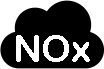
<style>
.page{position:relative;width:104px;height:69px;background:#000000}
.page>*{position:absolute;margin:0}
.t1{font:37.5px "ArialRoundedMTBold";color:#ffffff}
</style>
<div class="page">
<p class="t1" style="left:16px;top:35px;width:74px;height:27px">NOx</p>
</div>
